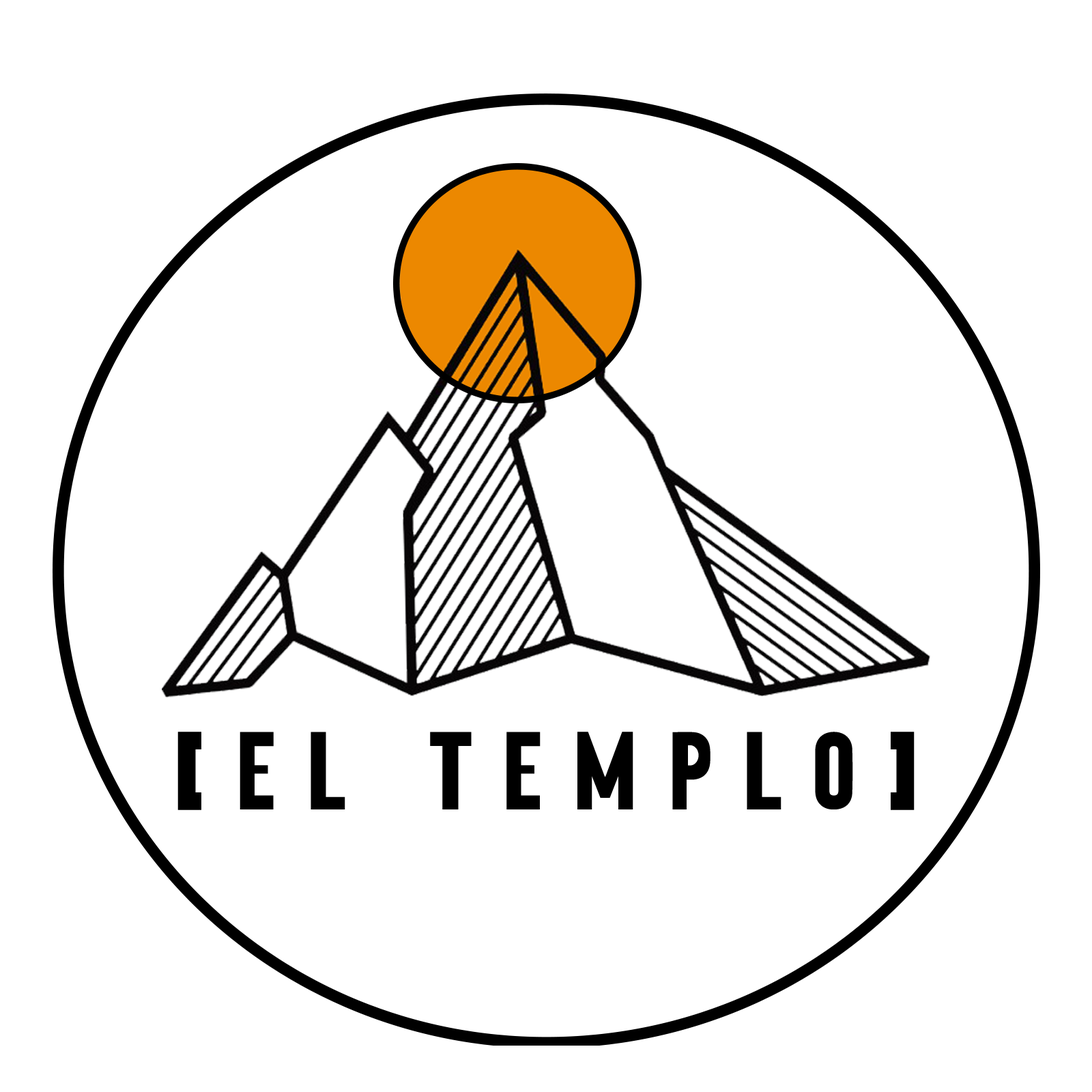
<style>
.page{position:relative;width:1092px;height:1092px;background:#ffffff}
.page>*{position:absolute;margin:0}
.t1{font:159.7px "OriginSansBold";letter-spacing:0.2em;color:#000000}
</style>
<div class="page">
<p class="t1" style="left:177px;top:732px;width:738px;height:78px">[EL TEMPLO]</p>
</div>
